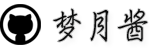
<style>
.page{position:relative;width:150px;height:50px;background:#ffffff}
.page>*{position:absolute;margin:0}
.t1{font:36px "Jxixinkai";color:#212222}
</style>
<div class="page">
<p class="t1" style="left:53px;top:8px;width:95px;height:34px">梦月酱</p>
</div>
